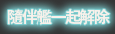
<style>
.page{position:relative;width:115px;height:34px}
.page>*{position:absolute;margin:0}
.t1{font:16px "GothicMB101Pr6N-Medium";letter-spacing:-0.1em;color:#f7f1eb}
</style>
<div class="page">
<p class="t1" style="left:7px;top:9px;width:103px;height:16px">隨伴艦一起解除</p>
</div>
